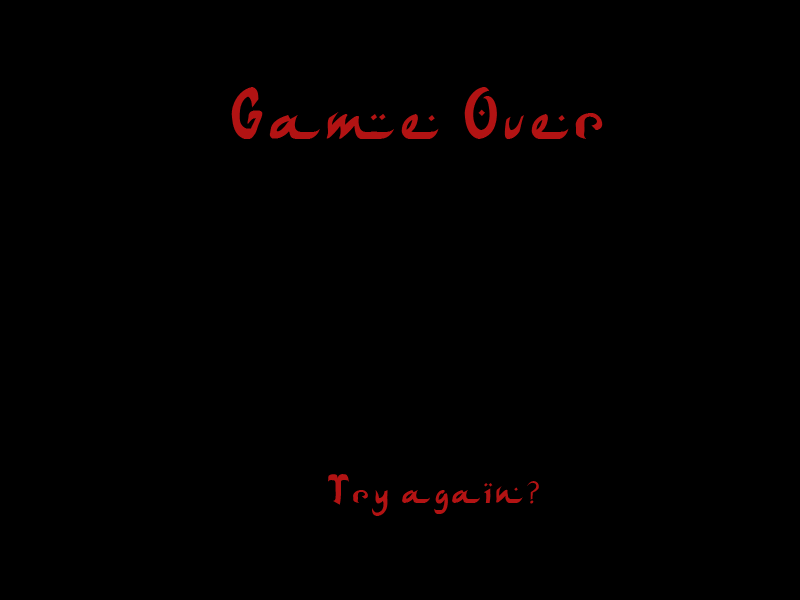
<style>
.page{position:relative;width:800px;height:600px;background:#000000}
.page>*{position:absolute;margin:0}
.t1{font:75px "ArabDancesMediumItalic";color:#b21313}
.t2{font:41.7px "ArabDancesMediumItalic";color:#b21313}
</style>
<div class="page">
<p class="t1" style="left:231px;top:87px;width:372px;height:52px">Game Over</p>
<p class="t2" style="left:328px;top:474px;width:211px;height:42px">Try again?</p>
</div>
